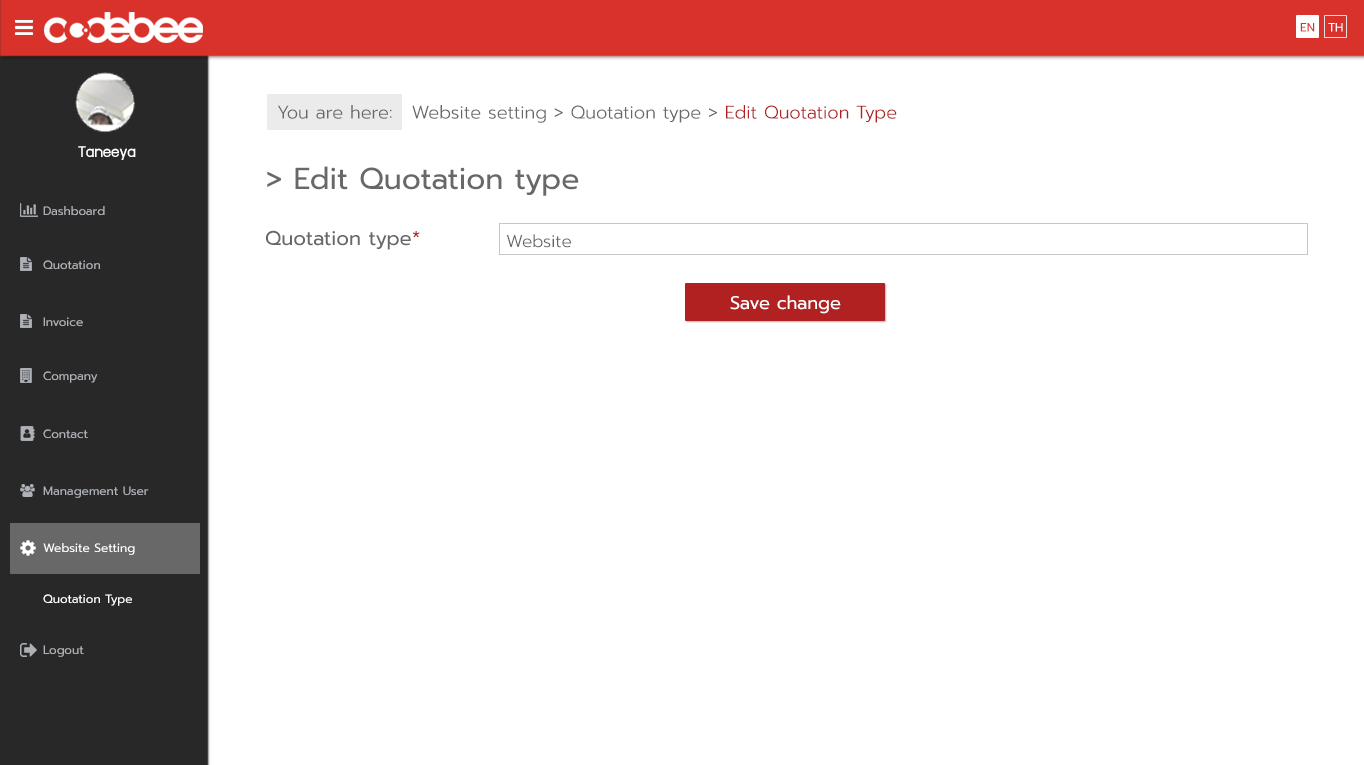
<style>
.page{position:relative;width:1364px;height:765px;background:#ffffff}
.page>*{position:absolute;margin:0}
.t1{font:12px "Prompt-Regular";color:#d8322b}
.t2{font:12px "Prompt-Regular";color:#ffffff}
.t3{font:18px "Prompt-Light";color:#686868}
.t4{font:18px "Prompt-Light";color:#b22121}
.t5{font:18px "supermarket";color:#ffffff}
.t6{font:30px "Prompt-Regular";color:#686868}
.t7{font:12px "Prompt-Regular";color:#aeb2b7}
.t8{font:20px "Prompt-Regular";color:#686868}
.t9{font:20px "Prompt-Regular";color:#b22121}
.t10{font:17px "Prompt-Light";color:#686868}
.t11{font:18px "Prompt-Regular";color:#ffffff}
</style>
<div class="page">
<p class="t1" style="left:1300px;top:23px;width:15px;height:9px">EN</p>
<p class="t2" style="left:1328px;top:23px;width:15px;height:9px">TH</p>
<p class="t3" style="left:278px;top:105px;width:114px;height:14px">You are here:</p>
<p class="t3" style="left:412px;top:105px;width:485px;height:18px">Website setting &gt; Quotation type &gt; <span class="t4">Edit Quotation Type</span></p>
<p class="t5" style="left:78px;top:146px;width:58px;height:14px">Taneeya</p>
<p class="t6" style="left:267px;top:166px;width:312px;height:30px">&gt; Edit Quotation type</p>
<p class="t7" style="left:43px;top:206px;width:62px;height:10px">Dashboard</p>
<p class="t8" style="left:266px;top:230px;width:154px;height:20px">Quotation type<span class="t9">*</span></p>
<p class="t10" style="left:506px;top:234px;width:65px;height:14px">Website</p>
<p class="t7" style="left:43px;top:260px;width:57px;height:10px">Quotation</p>
<p class="t11" style="left:730px;top:295px;width:111px;height:19px">Save change</p>
<p class="t7" style="left:43px;top:317px;width:40px;height:10px">Invoice</p>
<p class="t7" style="left:43px;top:371px;width:55px;height:12px">Company</p>
<p class="t7" style="left:43px;top:429px;width:45px;height:10px">Contact</p>
<p class="t7" style="left:43px;top:486px;width:106px;height:12px">Management User</p>
<p class="t2" style="left:43px;top:543px;width:92px;height:12px">Website Setting</p>
<p class="t2" style="left:43px;top:594px;width:89px;height:12px">Quotation Type</p>
<p class="t7" style="left:43px;top:645px;width:41px;height:12px">Logout</p>
</div>
